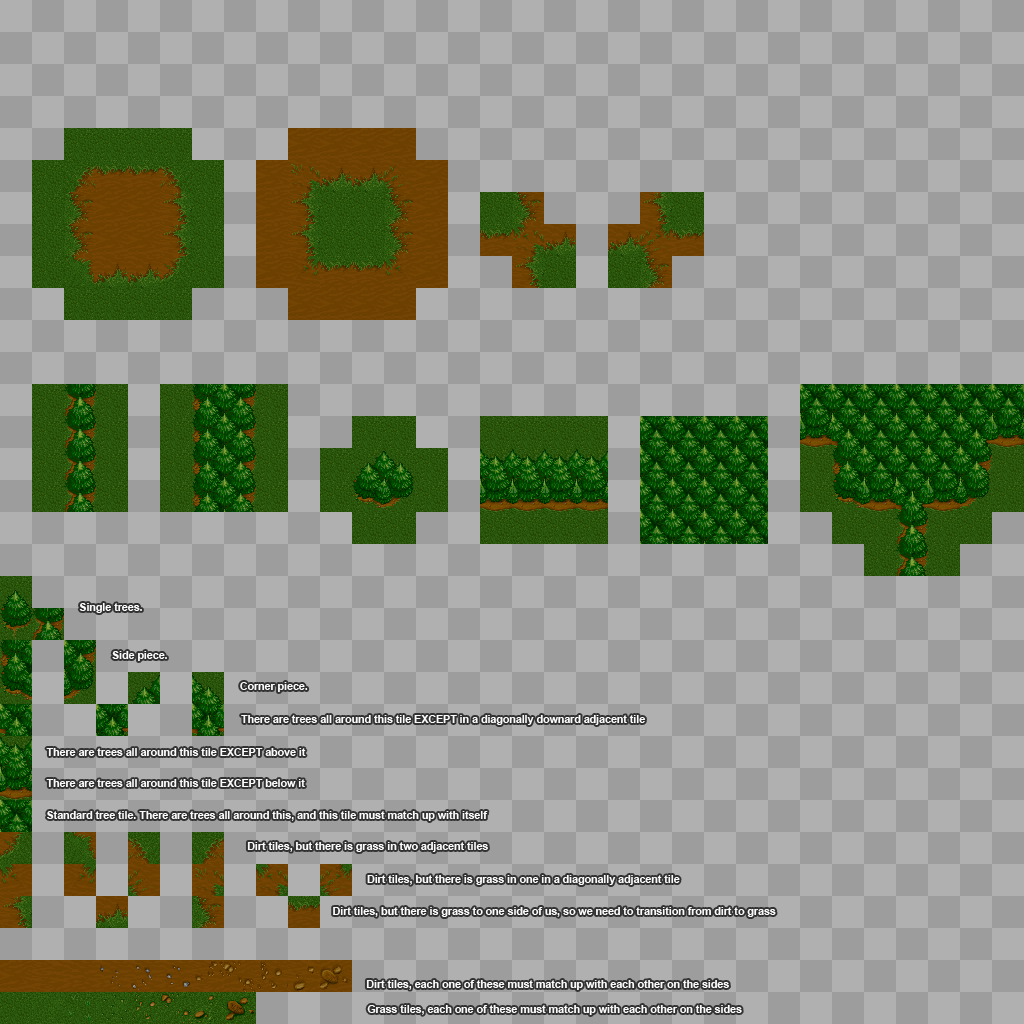
<style>
.page{position:relative;width:1024px;height:1024px;background:#9d9d9d}
.page>*{position:absolute;margin:0}
.t1{font:10.6px "Arial-BoldMT";color:#fbfbfb}
</style>
<div class="page">
<p class="t1" style="left:79px;top:603px;width:63px;height:10px">Single trees.</p>
<p class="t1" style="left:112px;top:651px;width:55px;height:10px">Side piece.</p>
<p class="t1" style="left:240px;top:682px;width:68px;height:10px">Corner piece.</p>
<p class="t1" style="left:241px;top:715px;width:404px;height:10px">There are trees all around this tile EXCEPT in a diagonally downard adjacent tile</p>
<p class="t1" style="left:46px;top:748px;width:260px;height:8px">There are trees all around this tile EXCEPT above it</p>
<p class="t1" style="left:46px;top:779px;width:259px;height:8px">There are trees all around this tile EXCEPT below it</p>
<p class="t1" style="left:47px;top:811px;width:441px;height:10px">Standard tree tile. There are trees all around this, and this tile must match up with itself</p>
<p class="t1" style="left:247px;top:842px;width:241px;height:10px">Dirt tiles, but there is grass in two adjacent tiles</p>
<p class="t1" style="left:367px;top:875px;width:313px;height:10px">Dirt tiles, but there is grass in one in a diagonally adjacent tile</p>
<p class="t1" style="left:333px;top:907px;width:443px;height:10px">Dirt tiles, but there is grass to one side of us, so we need to transition from dirt to grass</p>
<p class="t1" style="left:366px;top:980px;width:363px;height:10px">Dirt tiles, each one of these must match up with each other on the sides</p>
<p class="t1" style="left:367px;top:1005px;width:375px;height:10px">Grass tiles, each one of these must match up with each other on the sides</p>
</div>
